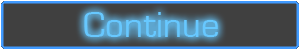
<style>
.page{position:relative;width:300px;height:50px;background:#404040}
.page>*{position:absolute;margin:0}
.t1{font:37.4px "EurostileRegular";color:#67c8ff}
</style>
<div class="page">
<p class="t1" style="left:84px;top:12px;width:134px;height:25px">Continue</p>
</div>
